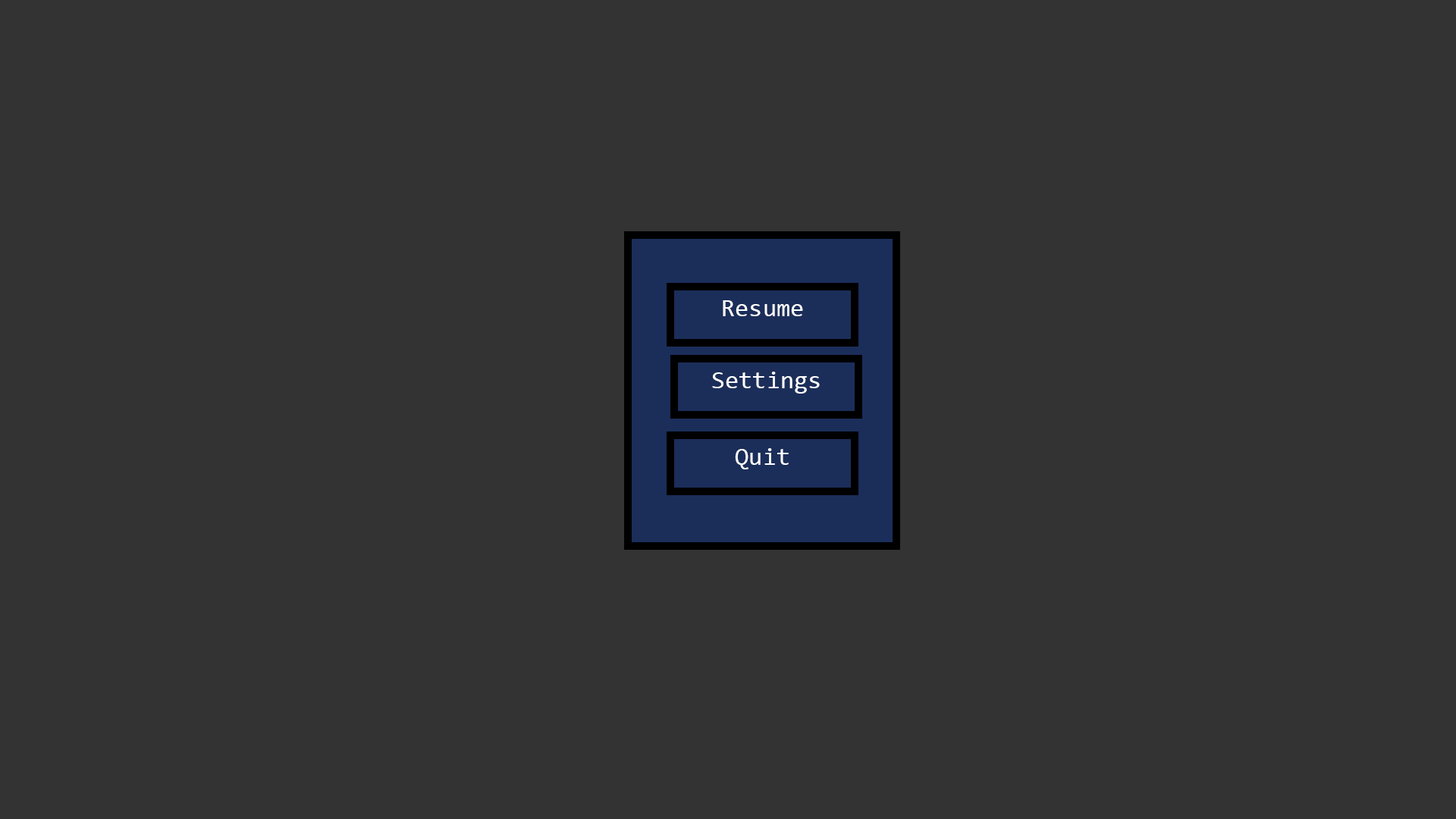
<style>
.page{position:relative;width:1456px;height:819px;background:#333333}
.page>*{position:absolute;margin:0}
.t1{font:25px "Consolas";color:#ffffff}
</style>
<div class="page">
<p class="t1" style="left:723px;top:300px;width:80px;height:16px">Resume</p>
<p class="t1" style="left:712px;top:372px;width:108px;height:22px">Settings</p>
<p class="t1" style="left:735px;top:448px;width:54px;height:21px">Quit</p>
</div>
